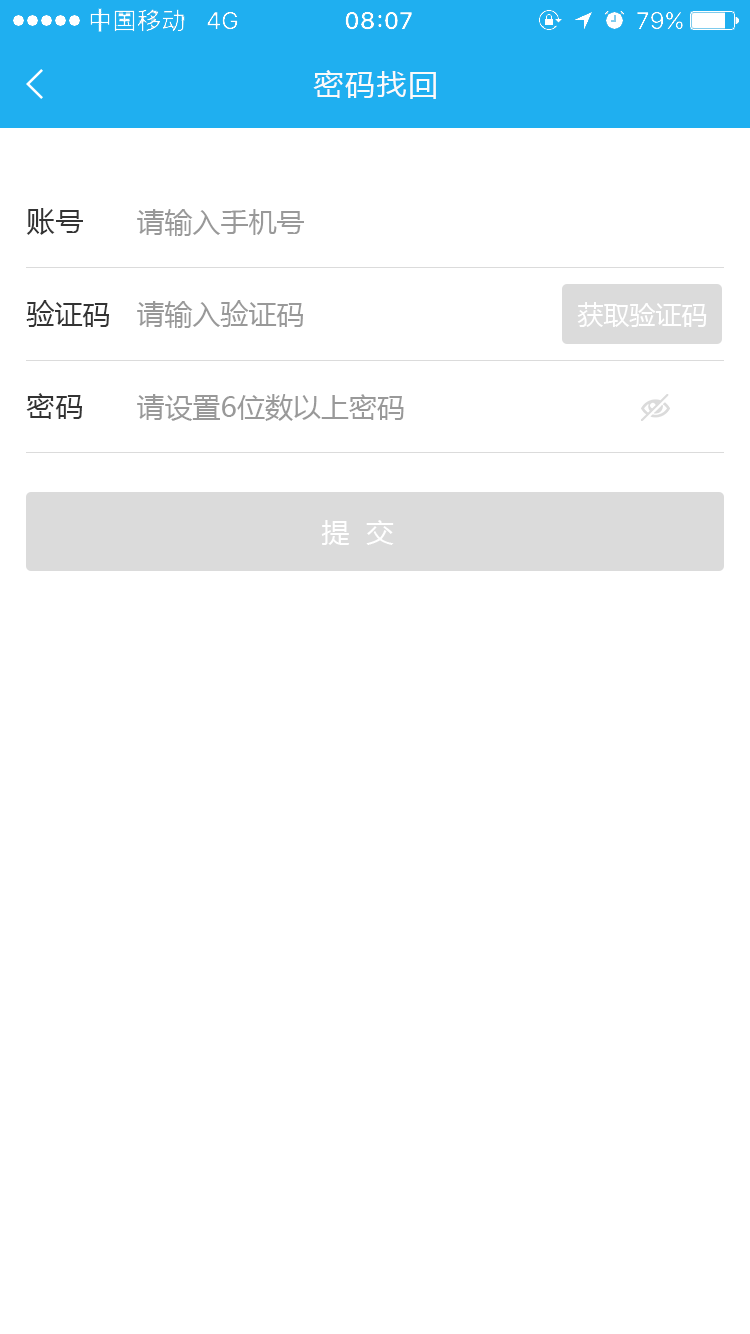
<style>
.page{position:relative;width:750px;height:1334px;background:#ffffff}
.page>*{position:absolute;margin:0}
.t1{font:30px "MicrosoftYaHei";letter-spacing:0.05em;color:#fafafa}
.t2{font:28px "MicrosoftYaHei";letter-spacing:0.05em;color:#333333}
.t3{font:28px "MicrosoftYaHei";color:#999999}
.t4{font:28px "MicrosoftYaHei";color:#333333}
.t5{font:26px "MicrosoftYaHei";color:#ffffff}
.t6{font:28px "MicrosoftYaHei";color:#ffffff}
</style>
<div class="page">
<p class="t1" style="left:313px;top:70px;width:123px;height:29px">密码找回</p>
<p class="t2" style="left:26px;top:208px;width:57px;height:27px">账号</p>
<p class="t3" style="left:137px;top:209px;width:167px;height:27px">请输入手机号</p>
<p class="t4" style="left:26px;top:300px;width:83px;height:27px">验证码</p>
<p class="t3" style="left:137px;top:300px;width:166px;height:28px">请输入验证码</p>
<p class="t5" style="left:577px;top:302px;width:130px;height:25px">获取验证码</p>
<p class="t2" style="left:26px;top:393px;width:56px;height:26px">密码</p>
<p class="t3" style="left:137px;top:394px;width:267px;height:27px">请设置6位数以上密码</p>
<p class="t6" style="left:321px;top:520px;width:73px;height:25px">提  交</p>
</div>
